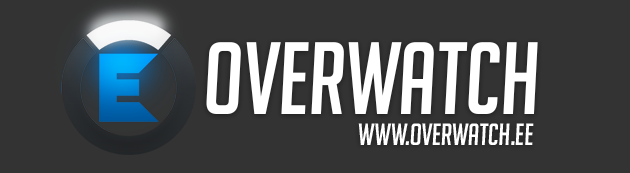
<style>
.page{position:relative;width:630px;height:173px;background:#333333}
.page>*{position:absolute;margin:0}
.t1{font:100px "BigNoodleTitling-Oblique";color:#ffffff}
.t2{font:30px "BigNoodleTitling-Oblique";color:#ffffff}
</style>
<div class="page">
<p class="t1" style="left:206px;top:42px;width:332px;height:72px">OVERWATCH</p>
<p class="t2" style="left:358px;top:123px;width:176px;height:22px">www.overwatch.ee</p>
</div>
